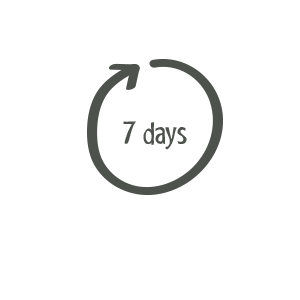
<style>
.page{position:relative;width:300px;height:300px;background:#ffffff}
.page>*{position:absolute;margin:0}
.t1{font:30px "ShakyHandSomeComic";color:#4e524d}
</style>
<div class="page">
<p class="t1" style="left:123px;top:121px;width:64px;height:29px">7 days</p>
</div>
